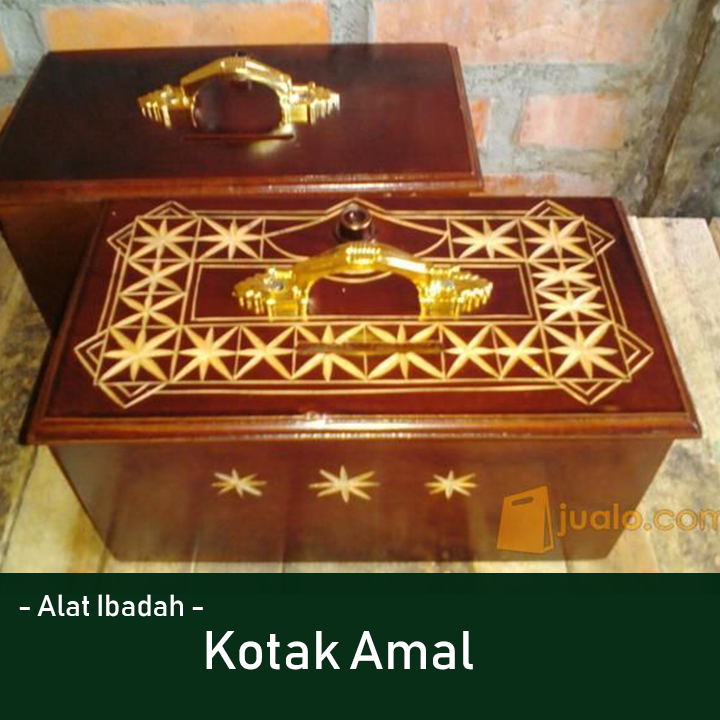
<style>
.page{position:relative;width:720px;height:720px}
.page>*{position:absolute;margin:0}
.t1{font:30px "Bahnschrift";color:#ffffff}
.t2{font:53.6px "Bahnschrift";color:#ffffff}
</style>
<div class="page">
<p class="t1" style="left:19px;top:594px;width:184px;height:23px">- Alat Ibadah -</p>
<p class="t2" style="left:206px;top:631px;width:267px;height:39px">Kotak Amal</p>
</div>
